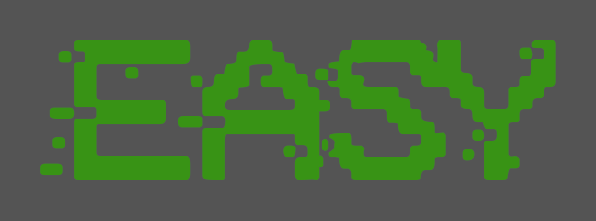
<style>
.page{position:relative;width:596px;height:221px;background:#545454}
.page>*{position:absolute;margin:0}
.t1{font:200px "PositiveSystem";color:#389315}
</style>
<div class="page">
<p class="t1" style="left:40px;top:40px;width:516px;height:140px">Easy</p>
</div>
